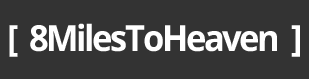
<style>
.page{position:relative;width:309px;height:79px;background:#333333}
.page>*{position:absolute;margin:0}
.t1{font:36px "OpenSans-Bold";letter-spacing:-0.07em;color:#ffffff;scale:0.96 1}
</style>
<div class="page">
<p class="t1" style="left:9px;top:23px;width:291px;height:34px">[  8MilesToHeaven  ]</p>
</div>
